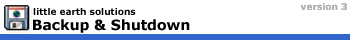
<style>
.page{position:relative;width:350px;height:40px;background:#ffffff}
.page>*{position:absolute;margin:0}
.t1{font:9px "Verdana-Bold";color:#b1b1b1}
.t2{font:9px "Verdana-Bold";color:#000000}
.t3{font:14px "Verdana-Bold";color:#000000}
</style>
<div class="page">
<p class="t1" style="left:300px;top:3px;width:47px;height:7px">version 3</p>
<p class="t2" style="left:33px;top:8px;width:103px;height:7px">little earth solutions</p>
<p class="t3" style="left:33px;top:19px;width:157px;height:14px">Backup &amp; Shutdown</p>
</div>
